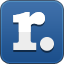
<style>
.page{position:relative;width:64px;height:64px}
.page>*{position:absolute;margin:0}
.t1{font:76.1px "BookmanOldStyle-Bold";color:#ffffff}
</style>
<div class="page">
<p class="t1" style="left:13px;top:12px;width:41px;height:39px">r.</p>
</div>
